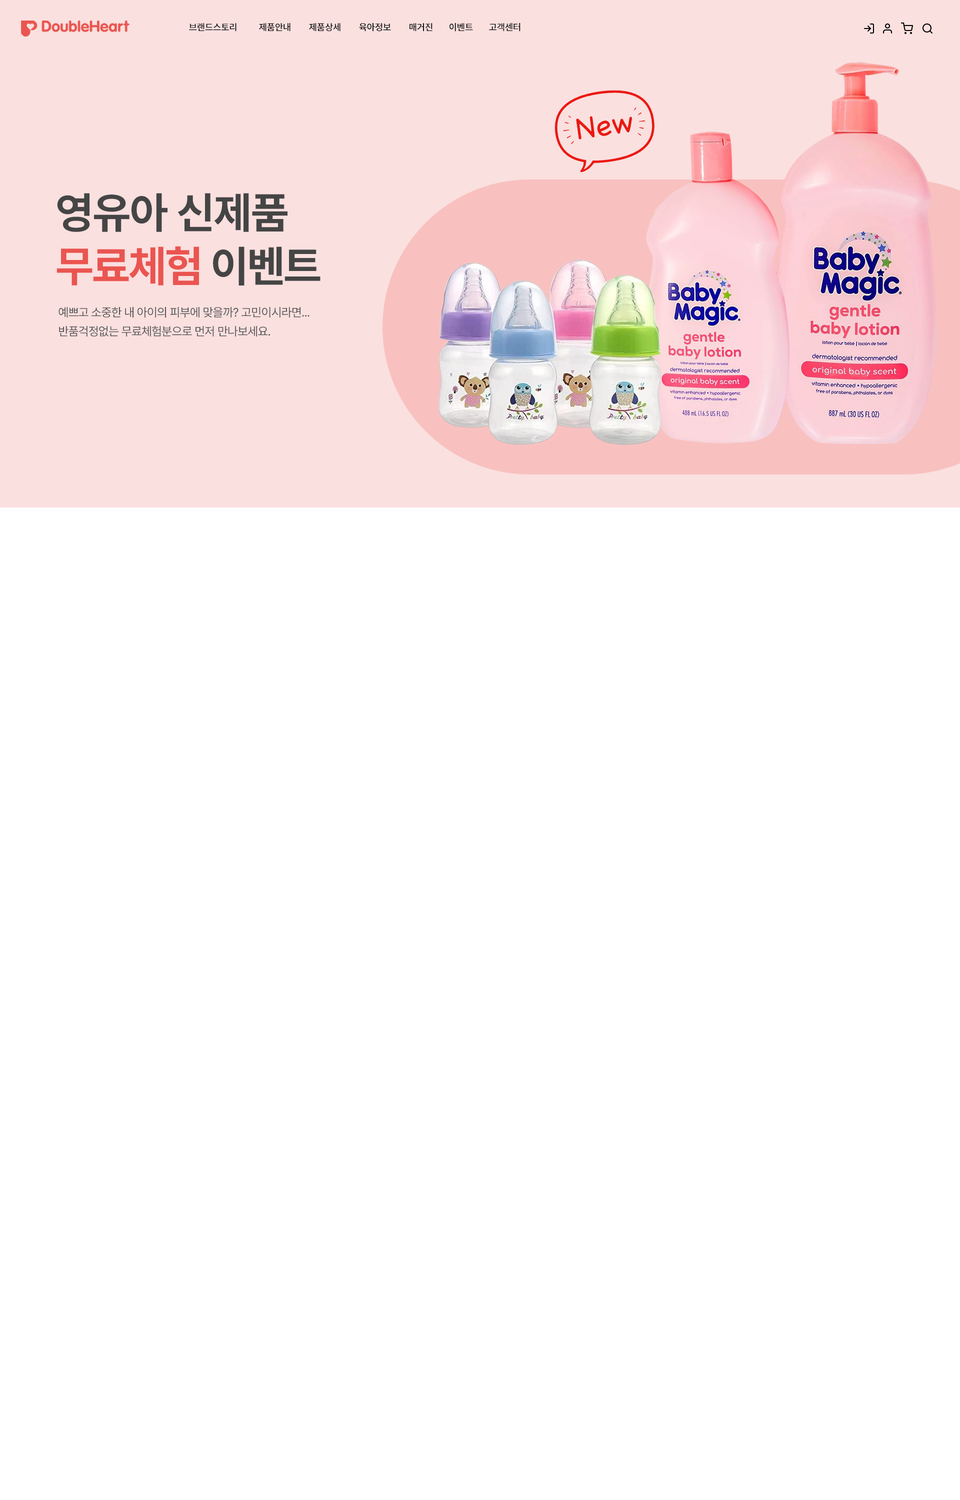
<style>
.page{position:relative;width:960px;height:1500px;background:#ffffff}
.page>*{position:absolute;margin:0}
.t1{font:9px "NotoSansKR-Medium";letter-spacing:-0.025em;color:#121212}
.t2{font:43.5px "Pretendard-Bold";letter-spacing:-0.01em;color:#454545}
.t3{font:43.5px "Pretendard-Bold";letter-spacing:-0.025em;color:#ea5550}
.t4{font:43.5px "Pretendard-Bold";letter-spacing:-0.025em;color:#454545}
.t5{font:12px/19px "Pretendard-Regular";letter-spacing:-0.025em;color:#565656}
</style>
<div class="page">
<p class="t1" style="left:189px;top:23px;width:47px;height:9px">브랜드스토리</p>
<p class="t1" style="left:259px;top:23px;width:31px;height:9px">제품안내</p>
<p class="t1" style="left:309px;top:23px;width:31px;height:9px">제품상세</p>
<p class="t1" style="left:359px;top:23px;width:32px;height:9px">육아정보</p>
<p class="t1" style="left:410px;top:23px;width:22px;height:9px">매거진</p>
<p class="t1" style="left:450px;top:23px;width:23px;height:9px">이벤트</p>
<p class="t1" style="left:489px;top:23px;width:31px;height:9px">고객센터</p>
<p class="t2" style="left:57px;top:193px;width:231px;height:39px">영유아 신제품</p>
<p class="t3" style="left:56px;top:246px;width:264px;height:40px">무료체험<span class="t4"> 이벤트</span></p>
<p class="t5" style="left:58px;top:307px;width:252px;height:29px">예쁘고 소중한 내 아이의 피부에 맞을까? 고민이시라면...<br>반품걱정없는 무료체험분으로 먼저 만나보세요.</p>
</div>
